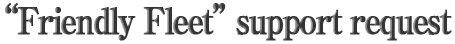
<style>
.page{position:relative;width:455px;height:44px;background:#ffffff}
.page>*{position:absolute;margin:0}
.t1{font:36px "RyuminPro-ExBold";letter-spacing:-0.08em;color:#343434;font-weight:bold;scale:0.9 1}
</style>
<div class="page">
<p class="t1" style="left:5px;top:3px;width:447px;height:38px">“Friendly Fleet” support request</p>
</div>
